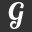
<style>
.page{position:relative;width:32px;height:32px;background:#333333}
.page>*{position:absolute;margin:0}
.t1{font:28px "Lobster1.4";color:#ffffff}
</style>
<div class="page">
<p class="t1" style="left:8px;top:2px;width:16px;height:27px">G</p>
</div>
